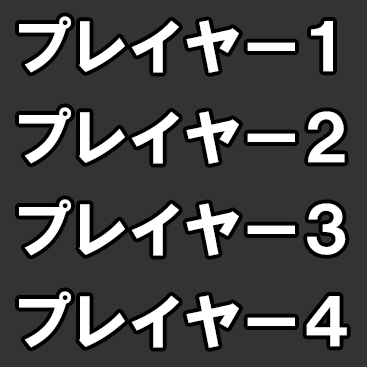
<style>
.page{position:relative;width:367px;height:367px;background:#333333}
.page>*{position:absolute;margin:0}
.t1{font:62.5px/91.7px "HGPSoeiKakugothicUB";letter-spacing:0.075em;color:#ffffff}
</style>
<div class="page">
<p class="t1" style="left:19px;top:16px;width:328px;height:332px;text-align:center">プレイヤー１<br>プレイヤー２<br>プレイヤー３<br>プレイヤー４</p>
</div>
